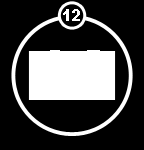
<style>
.page{position:relative;width:144px;height:150px;background:#000000}
.page>*{position:absolute;margin:0}
.t1{font:16.3px "Arial-Black";letter-spacing:-0.06em;color:#ffffff}
</style>
<div class="page">
<p class="t1" style="left:63px;top:9px;width:17px;height:12px">12</p>
</div>
